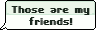
<style>
.page{position:relative;width:96px;height:30px;background:#fcfffb}
.page>*{position:absolute;margin:0}
.t1{font:10px "SFPixelate-Bold";color:#1b281e;scale:0.95 1}
</style>
<div class="page">
<p class="t1" style="left:11px;top:6px;width:78px;height:19px;text-align:center">Those are my<br>friends!</p>
<p class="t1" style="left:12px;top:6px;width:78px;height:19px;text-align:center">Those are my<br>friends!</p>
</div>
